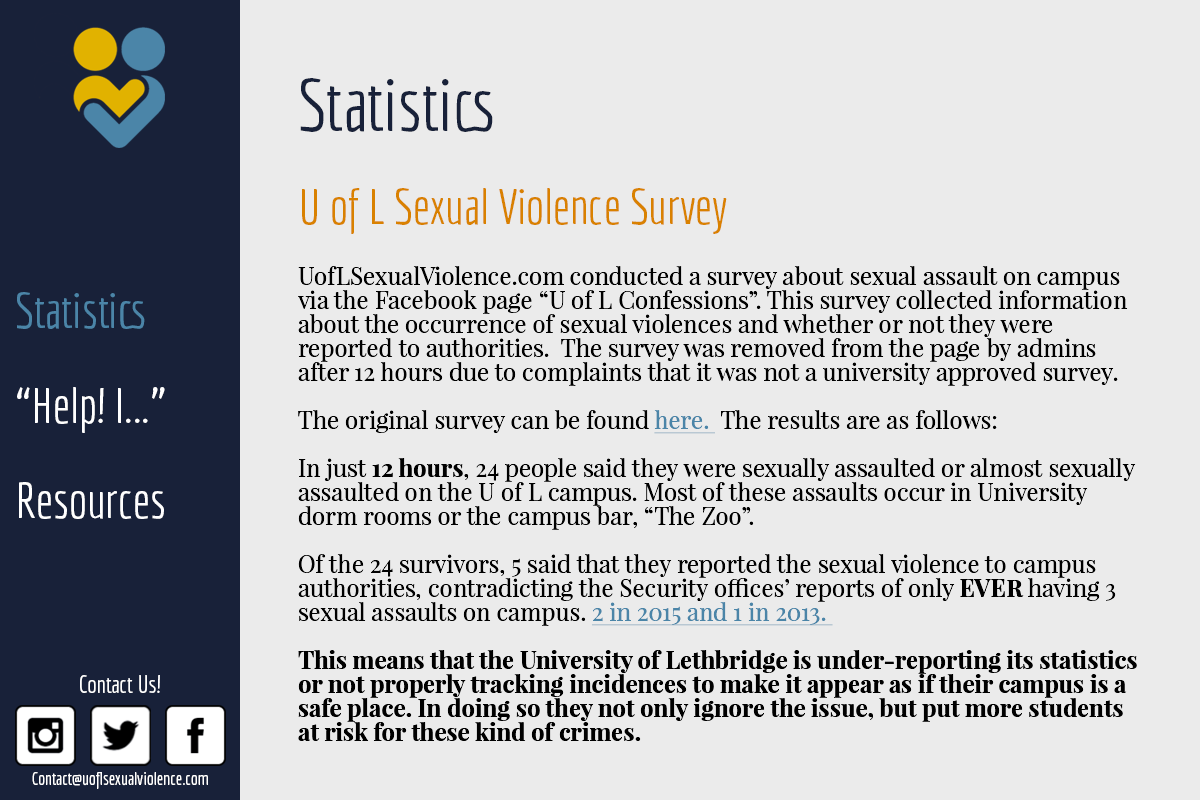
<style>
.page{position:relative;width:1200px;height:800px;background:#ebebeb}
.page>*{position:absolute;margin:0}
.t1{font:72px "Economica-Regular";color:#182139}
.t2{font:48px "Economica-Regular";color:#d98100}
.t3{font:24px/24px "PlayfairDisplay-Regular";color:#000000}
.t4{font:24px/24px "PlayfairDisplay-Regular";color:#4b85a8;text-decoration:underline}
.t5{font:24px/24px "PlayfairDisplay-Bold";color:#000000}
.t6{font:48px/95px "Economica-Regular";color:#ffffff}
.t7{font:60px/95px "Economica-Regular";color:#ffffff}
.t8{font:48px/95px "Economica-Regular";color:#4b85a8}
.t9{font:24px "Economica-Regular";color:#ffffff}
.t10{font:18px "Economica-Regular";color:#ffffff}
</style>
<div class="page">
<p class="t1" style="left:300px;top:78px;width:193px;height:54px">Statistics</p>
<p class="t2" style="left:302px;top:188px;width:425px;height:46px">U of L Sexual Violence Survey</p>
<p class="t3" style="left:298px;top:266px;width:839px;height:475px">UofLSexualViolence.com conducted a survey about sexual assault on campus via the Facebook page “U of L Confessions”. This survey collected information about the occurrence of sexual violences and whether or not they were         reported to authorities.  The survey was removed from the page by admins after 12 hours due to complaints that it was not a university approved survey. <br><br>The original survey can be found <span class="t4">here. </span> The results are as follows:<br><br>In just <span class="t5">12 hours</span>, 24 people said they were sexually assaulted or almost sexually assaulted on the U of L campus. Most of these assaults occur in University dorm rooms or the campus bar, “The Zoo”.<br><br>Of the 24 survivors, 5 said that they reported the sexual violence to campus authorities, contradicting the Security offices’ reports of only <span class="t5">EVER</span> having 3 sexual assaults on campus. <span class="t4">2 in 2015 and 1 in 2013. <br><br></span><span class="t5">This means that the University of Lethbridge is under-reporting its statistics or not properly tracking incidences to make it appear as if their campus is a safe place. In doing so they not only ignore the issue, but put more students at risk for these kind of crimes.</span></p>
<p class="t6" style="left:17px;top:292px;width:148px;height:227px;text-align:center"><span class="t7"><br></span><span class="t8">Statistics<br></span>“Help! I...”<br>Resources</p>
<p class="t9" style="left:80px;top:675px;width:80px;height:18px">Contact Us!</p>
<p class="t10" style="left:32px;top:772px;width:176px;height:17px">Contact@uoflsexualviolence.com</p>
</div>
